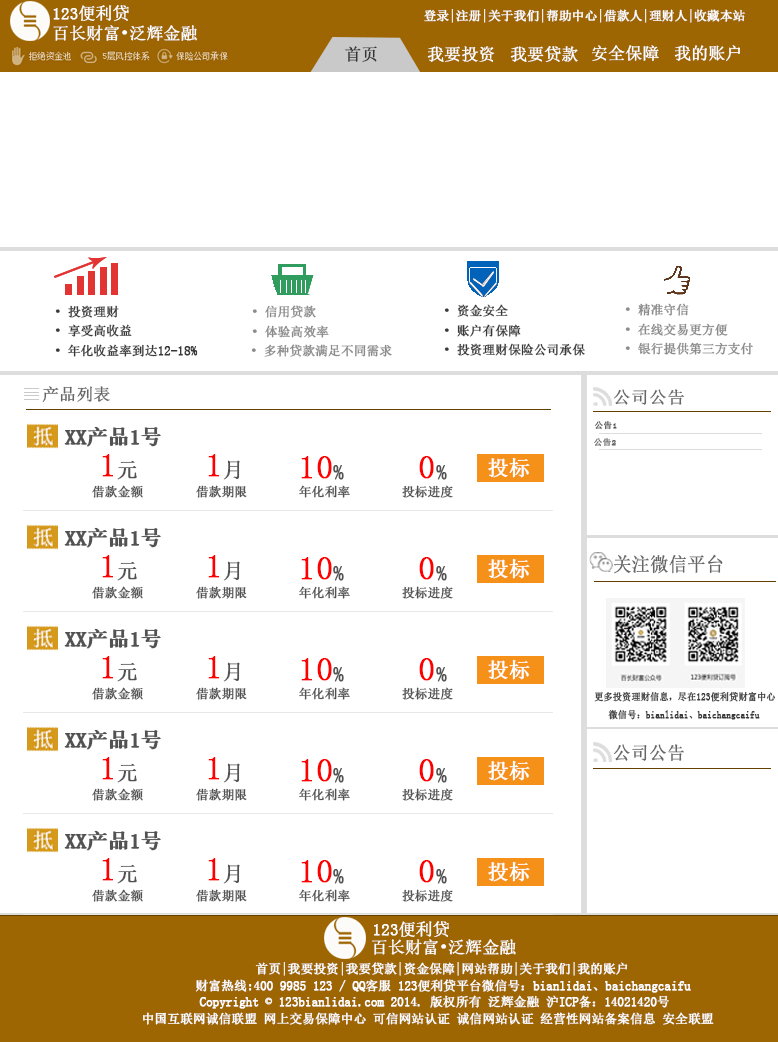
<style>
.page{position:relative;width:778px;height:1042px;background:#ffffff}
.page>*{position:absolute;margin:0}
.t1{font:16.7px "SimSun";color:#ffffff;font-weight:bold}
.t2{font:12.5px "SimSun";color:#ffffff;font-weight:bold}
.t3{font:16.7px "SimSun";color:#343434;font-weight:bold}
.t4{font:12.5px "SimSun";color:#393939;font-weight:bold}
.t5{font:12.5px "SimSun";color:#8b8b8b;font-weight:bold}
.t6{font:16.7px "SimSun";color:#666666;font-weight:bold}
.t7{font:16.7px "SimSun";color:#666666;font-weight:bold;scale:1.06 1}
.t8{font:8.3px "SimSun";color:#525250;font-weight:bold;scale:1.06 1}
.t9{font:20.8px "SimSun";color:#525252;font-weight:bold}
.t10{font:8.3px "SimSun";color:#666666;font-weight:bold;scale:1.06 1}
.t11{font:33.3px "SimSun";color:#ff0000;font-weight:bold}
.t12{font:33.3px "SimSun";color:#fe0000;font-weight:bold}
.t13{font:20.8px "SimSun";color:#ffffff;font-weight:bold}
.t14{font:12.5px "SimSun";color:#525252;font-weight:bold}
.t15{font:19.7px "SimSun";color:#666666;font-weight:bold;scale:0.92 1}
.t16{font:9.8px "SimSun";color:#393939;font-weight:bold;scale:0.92 1}
.t17{font:17.9px "SimSun";color:#666666;font-weight:bold}
</style>
<div class="page">
<p class="t1" style="left:53px;top:5px;width:76px;height:17px">123便利贷</p>
<p class="t2" style="left:424px;top:9px;width:321px;height:14px">登录|注册|关于我们|帮助中心|借款人|理财人|收藏本站</p>
<p class="t1" style="left:53px;top:25px;width:144px;height:16px">百长财富•泛辉金融</p>
<p class="t3" style="left:345px;top:46px;width:32px;height:16px">首页</p>
<p class="t1" style="left:427px;top:46px;width:68px;height:16px">我要投资</p>
<p class="t1" style="left:510px;top:46px;width:68px;height:16px">我要贷款</p>
<p class="t1" style="left:592px;top:45px;width:67px;height:16px">安全保障</p>
<p class="t1" style="left:674px;top:45px;width:66px;height:16px">我的账户</p>
<p class="t4" style="left:55px;top:305px;width:64px;height:13px">• 投资理财</p>
<p class="t5" style="left:252px;top:305px;width:64px;height:13px">• 信用贷款</p>
<p class="t4" style="left:444px;top:304px;width:64px;height:13px">• 资金安全</p>
<p class="t5" style="left:625px;top:303px;width:64px;height:13px">• 精准守信</p>
<p class="t4" style="left:55px;top:324px;width:77px;height:13px">• 享受高收益</p>
<p class="t5" style="left:252px;top:325px;width:77px;height:13px">• 体验高效率</p>
<p class="t4" style="left:444px;top:324px;width:77px;height:13px">• 账户有保障</p>
<p class="t5" style="left:625px;top:323px;width:103px;height:13px">• 在线交易更方便</p>
<p class="t5" style="left:625px;top:342px;width:128px;height:13px">• 银行提供第三方支付</p>
<p class="t4" style="left:55px;top:344px;width:143px;height:13px">• 年化收益率到达12-18%</p>
<p class="t5" style="left:251px;top:344px;width:141px;height:13px">• 多种贷款满足不同需求</p>
<p class="t4" style="left:444px;top:343px;width:141px;height:13px">• 投资理财保险公司承保</p>
<p class="t6" style="left:42px;top:386px;width:68px;height:16px">产品列表</p>
<p class="t7" style="left:613px;top:389px;width:71px;height:16px">公司公告</p>
<p class="t8" style="left:594px;top:421px;width:23px;height:9px">公告1</p>
<p class="t9" style="left:64px;top:426px;width:96px;height:21px">XX产品1号</p>
<p class="t9" style="left:65px;top:426px;width:96px;height:21px">XX产品1号</p>
<p class="t10" style="left:594px;top:438px;width:22px;height:9px">公告2</p>
<p class="t11" style="left:102px;top:454px;width:35px;height:26px">1<span class="t9">元</span></p>
<p class="t11" style="left:208px;top:454px;width:32px;height:26px">1<span class="t9">月</span></p>
<p class="t11" style="left:301px;top:456px;width:43px;height:24px">10<span class="t9">%</span></p>
<p class="t12" style="left:419px;top:456px;width:28px;height:24px">0<span class="t9">%</span></p>
<p class="t13" style="left:488px;top:457px;width:42px;height:21px">投标</p>
<p class="t14" style="left:92px;top:485px;width:51px;height:13px">借款金额</p>
<p class="t14" style="left:196px;top:485px;width:51px;height:13px">借款期限</p>
<p class="t14" style="left:299px;top:485px;width:51px;height:13px">年化利率</p>
<p class="t14" style="left:402px;top:485px;width:51px;height:13px">投标进度</p>
<p class="t9" style="left:64px;top:527px;width:96px;height:21px">XX产品1号</p>
<p class="t9" style="left:65px;top:527px;width:96px;height:21px">XX产品1号</p>
<p class="t11" style="left:102px;top:555px;width:35px;height:26px">1<span class="t9">元</span></p>
<p class="t11" style="left:208px;top:555px;width:32px;height:26px">1<span class="t9">月</span></p>
<p class="t11" style="left:301px;top:557px;width:43px;height:24px">10<span class="t9">%</span></p>
<p class="t12" style="left:419px;top:557px;width:28px;height:24px">0<span class="t9">%</span></p>
<p class="t13" style="left:488px;top:558px;width:42px;height:21px">投标</p>
<p class="t15" style="left:614px;top:554px;width:109px;height:20px">关注微信平台</p>
<p class="t14" style="left:92px;top:586px;width:51px;height:13px">借款金额</p>
<p class="t14" style="left:196px;top:586px;width:51px;height:13px">借款期限</p>
<p class="t14" style="left:299px;top:586px;width:51px;height:13px">年化利率</p>
<p class="t14" style="left:402px;top:586px;width:51px;height:13px">投标进度</p>
<p class="t9" style="left:64px;top:628px;width:96px;height:21px">XX产品1号</p>
<p class="t9" style="left:65px;top:628px;width:96px;height:21px">XX产品1号</p>
<p class="t11" style="left:102px;top:656px;width:35px;height:26px">1<span class="t9">元</span></p>
<p class="t11" style="left:208px;top:656px;width:32px;height:26px">1<span class="t9">月</span></p>
<p class="t11" style="left:301px;top:658px;width:43px;height:24px">10<span class="t9">%</span></p>
<p class="t12" style="left:419px;top:658px;width:28px;height:24px">0<span class="t9">%</span></p>
<p class="t13" style="left:488px;top:659px;width:42px;height:21px">投标</p>
<p class="t14" style="left:92px;top:687px;width:51px;height:13px">借款金额</p>
<p class="t14" style="left:196px;top:687px;width:51px;height:13px">借款期限</p>
<p class="t14" style="left:299px;top:687px;width:51px;height:13px">年化利率</p>
<p class="t14" style="left:402px;top:687px;width:51px;height:13px">投标进度</p>
<p class="t16" style="left:594px;top:691px;width:181px;height:29px">更多投资理财信息，尽在123便利贷财富中心<br>   微信号：bianlidai、baichangcaifu</p>
<p class="t9" style="left:64px;top:729px;width:96px;height:21px">XX产品1号</p>
<p class="t9" style="left:65px;top:729px;width:96px;height:21px">XX产品1号</p>
<p class="t17" style="left:613px;top:744px;width:71px;height:17px">公司公告</p>
<p class="t11" style="left:102px;top:757px;width:35px;height:26px">1<span class="t9">元</span></p>
<p class="t11" style="left:208px;top:757px;width:32px;height:26px">1<span class="t9">月</span></p>
<p class="t11" style="left:301px;top:759px;width:43px;height:24px">10<span class="t9">%</span></p>
<p class="t12" style="left:419px;top:759px;width:28px;height:24px">0<span class="t9">%</span></p>
<p class="t13" style="left:488px;top:760px;width:42px;height:21px">投标</p>
<p class="t14" style="left:92px;top:788px;width:51px;height:13px">借款金额</p>
<p class="t14" style="left:196px;top:788px;width:51px;height:13px">借款期限</p>
<p class="t14" style="left:299px;top:788px;width:51px;height:13px">年化利率</p>
<p class="t14" style="left:402px;top:788px;width:51px;height:13px">投标进度</p>
<p class="t9" style="left:64px;top:830px;width:96px;height:21px">XX产品1号</p>
<p class="t9" style="left:65px;top:830px;width:96px;height:21px">XX产品1号</p>
<p class="t11" style="left:102px;top:858px;width:35px;height:26px">1<span class="t9">元</span></p>
<p class="t11" style="left:208px;top:858px;width:32px;height:26px">1<span class="t9">月</span></p>
<p class="t11" style="left:301px;top:860px;width:43px;height:24px">10<span class="t9">%</span></p>
<p class="t12" style="left:419px;top:860px;width:28px;height:24px">0<span class="t9">%</span></p>
<p class="t13" style="left:488px;top:861px;width:42px;height:21px">投标</p>
<p class="t14" style="left:92px;top:889px;width:51px;height:13px">借款金额</p>
<p class="t14" style="left:196px;top:889px;width:51px;height:13px">借款期限</p>
<p class="t14" style="left:299px;top:889px;width:51px;height:13px">年化利率</p>
<p class="t14" style="left:402px;top:889px;width:51px;height:13px">投标进度</p>
<p class="t1" style="left:374px;top:921px;width:75px;height:17px">123便利贷</p>
<p class="t1" style="left:372px;top:939px;width:144px;height:16px">百长财富•泛辉金融</p>
<p class="t2" style="left:255px;top:962px;width:373px;height:14px">首页|我要投资|我要贷款|资金保障|网站帮助|关于我们|我的账户</p>
<p class="t2" style="left:196px;top:979px;width:495px;height:14px">财富热线:400 9985 123 / QQ客服 123便利贷平台微信号：bianlidai、baichangcaifu</p>
<p class="t2" style="left:199px;top:995px;width:470px;height:14px">Copyright © 123bianlidai.com 2014. 版权所有 泛辉金融 沪ICP备：14021420号</p>
<p class="t2" style="left:143px;top:1012px;width:571px;height:13px">中国互联网诚信联盟 网上交易保障中心 可信网站认证 诚信网站认证 经营性网站备案信息 安全联盟</p>
</div>
